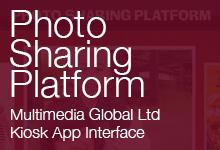
<style>
.page{position:relative;width:220px;height:150px}
.page>*{position:absolute;margin:0}
.t1{font:38px/30px "HelveticaNeue-Light";color:#ffffff}
.t2{font:16px/18px "HelveticaNeue-Light";color:#ffffff}
</style>
<div class="page">
<p class="t1" style="left:10px;top:10px;width:134px;height:88px">Photo<br>Sharing<br>Platform</p>
<p class="t2" style="left:11px;top:108px;width:149px;height:33px">Multimedia Global Ltd<br>Kiosk App Interface</p>
</div>
